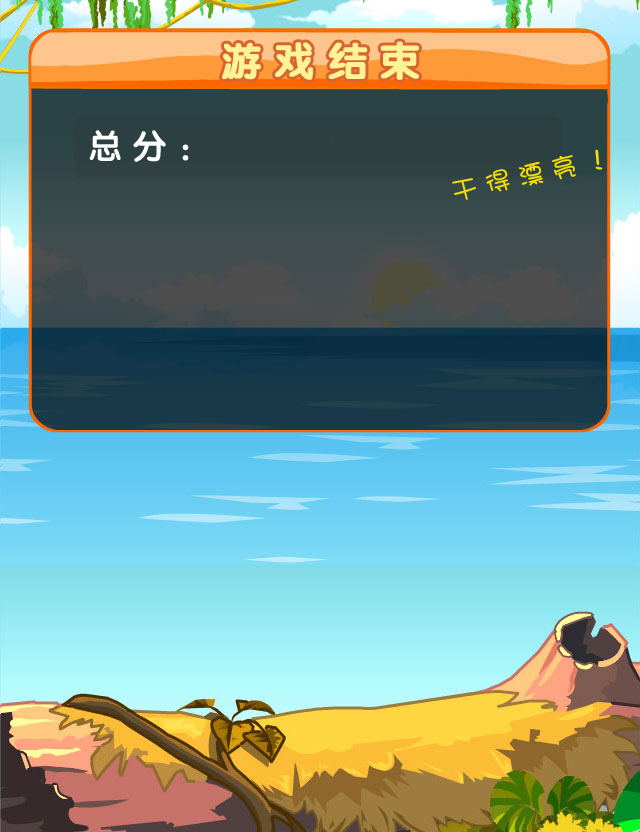
<style>
.page{position:relative;width:640px;height:832px}
.page>*{position:absolute;margin:0}
.t1{font:40px "JCuYuan";letter-spacing:0.3em;color:#fff495;font-weight:bold}
.t2{font:34px "JCuYuan";letter-spacing:0.3em;color:#ffffff}
.t3{font:26px "DFPShaoNvW5";letter-spacing:0.3em;color:#f8de00}
</style>
<div class="page">
<p class="t1" style="left:222px;top:41px;width:197px;height:39px">游戏结束</p>
<p class="t2" style="left:89px;top:130px;width:100px;height:32px">总分：</p>
<p class="t3" style="left:452px;top:149px;width:151px;height:51px;rotate:-12deg">干得漂亮！</p>
</div>
